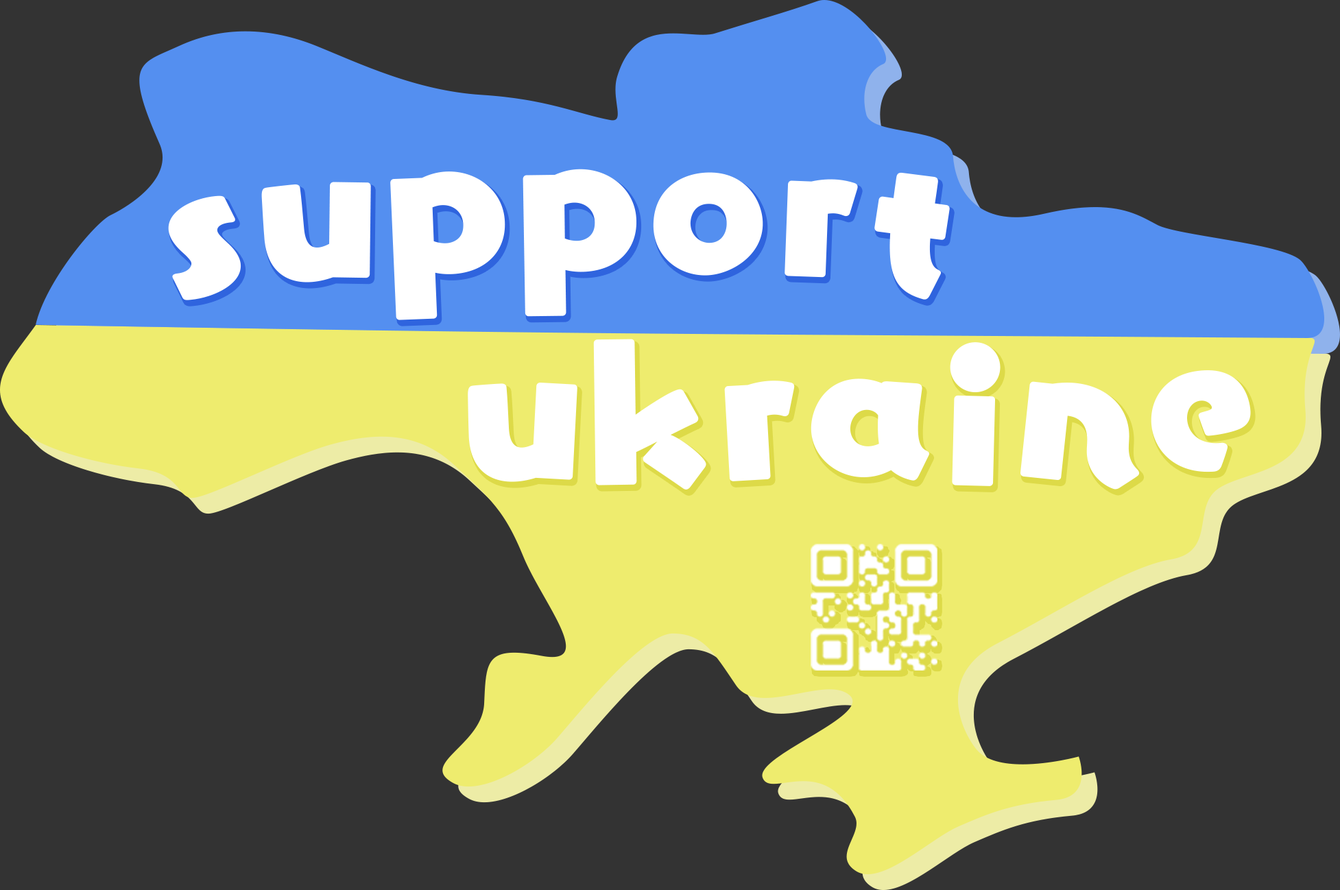
<style>
.page{position:relative;width:1340px;height:890px;background:#333333}
.page>*{position:absolute;margin:0}
.t1{font:169.3px "YurukaStd-UB";color:#ffffff}
</style>
<div class="page">
<p class="t1" style="left:390px;top:171px;width:115px;height:149px;rotate:-5deg">p</p>
<p class="t1" style="left:522px;top:169px;width:114px;height:148px;rotate:-4deg">p</p>
<p class="t1" style="left:653px;top:172px;width:110px;height:104px;rotate:-1deg">o</p>
<p class="t1" style="left:874px;top:172px;width:76px;height:128px;rotate:5deg">t</p>
<p class="t1" style="left:261px;top:182px;width:110px;height:100px;rotate:-2deg">u</p>
<p class="t1" style="left:784px;top:179px;width:74px;height:99px;rotate:5deg">r</p>
<p class="t1" style="left:168px;top:195px;width:73px;height:105px;rotate:-5deg">s</p>
<p class="t1" style="left:593px;top:339px;width:113px;height:151px;rotate:2deg">k</p>
<p class="t1" style="left:950px;top:342px;width:50px;height:144px;rotate:4deg">i</p>
<p class="t1" style="left:1151px;top:370px;width:100px;height:102px;rotate:-2deg">e</p>
<p class="t1" style="left:468px;top:382px;width:109px;height:100px">u</p>
<p class="t1" style="left:724px;top:381px;width:71px;height:100px">r</p>
<p class="t1" style="left:810px;top:378px;width:120px;height:103px;rotate:-1deg">a</p>
<p class="t1" style="left:1020px;top:381px;width:120px;height:109px;rotate:3deg">n</p>
</div>
